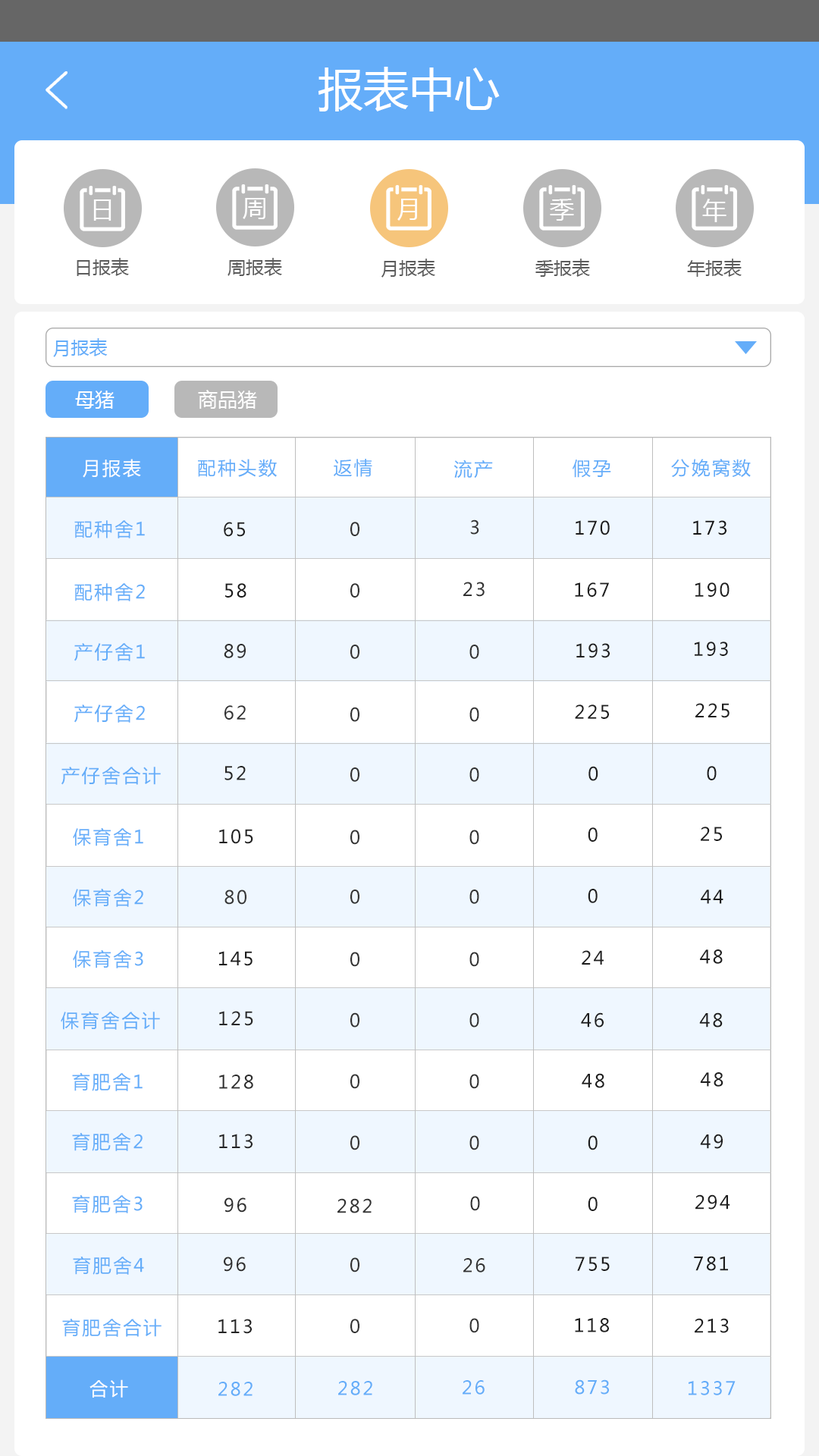
<style>
.page{position:relative;width:819px;height:1456px;background:#ffffff}
.page>*{position:absolute;margin:0}
.t1{font:45.5px "MicrosoftYaHei";color:#ffffff}
.t2{font:24.3px "MicrosoftYaHei";color:#ffffff}
.t3{font:18.2px "MicrosoftYaHei";color:#5c5c5c}
.t4{font:18.2px "MicrosoftYaHei";color:#64adf9}
.t5{font:19.7px "MicrosoftYaHei";color:#ffffff}
.t6{font:18.5px "MicrosoftYaHei";letter-spacing:0.1em;color:#ffffff}
.t7{font:18.5px "MicrosoftYaHei";letter-spacing:0.1em;color:#64adf9}
.t8{font:18.5px "MicrosoftYaHei";letter-spacing:0.1em;color:#1f1f1f}
.t9{font:18.5px "MicrosoftYaHei";letter-spacing:0.1em;color:#333333}
.t10{font:18.5px "MicrosoftYaHei";letter-spacing:0.1em;color:#1e1e1e}
.t11{font:18.5px "MicrosoftYaHei";letter-spacing:0.1em;color:#151515}
.t12{font:18.5px "MicrosoftYaHei";letter-spacing:0.1em;color:#1b1b1b}
.t13{font:18.5px "MicrosoftYaHei";letter-spacing:0.1em;color:#2e2e2e}
.t14{font:18.5px "MicrosoftYaHei";letter-spacing:0.1em;color:#333334}
.t15{font:18.5px "MicrosoftYaHei";letter-spacing:0.1em;color:#262626}
.t16{font:18.5px "MicrosoftYaHei";letter-spacing:0.1em;color:#212121}
.t17{font:18.5px "MicrosoftYaHei";letter-spacing:0.1em;color:#373737}
.t18{font:18.5px "MicrosoftYaHei";letter-spacing:0.1em;color:#1c1c1c}
.t19{font:18.5px "MicrosoftYaHei";letter-spacing:0.1em;color:#282828}
.t20{font:18.5px "MicrosoftYaHei";letter-spacing:0.1em;color:#242424}
.t21{font:18.5px "MicrosoftYaHei";letter-spacing:0.1em;color:#2f2f2f}
</style>
<div class="page">
<p class="t1" style="left:318px;top:67px;width:182px;height:44px">报表中心</p>
<p class="t2" style="left:243px;top:198px;width:22px;height:21px">周</p>
<p class="t2" style="left:93px;top:199px;width:18px;height:22px">日</p>
<p class="t2" style="left:397px;top:199px;width:20px;height:22px">月</p>
<p class="t2" style="left:550px;top:199px;width:24px;height:22px">季</p>
<p class="t2" style="left:702px;top:199px;width:24px;height:23px">年</p>
<p class="t3" style="left:77px;top:258px;width:52px;height:18px">日报表</p>
<p class="t3" style="left:227px;top:258px;width:55px;height:18px">周报表</p>
<p class="t3" style="left:381px;top:259px;width:54px;height:19px">月报表</p>
<p class="t3" style="left:535px;top:259px;width:55px;height:18px">季报表</p>
<p class="t3" style="left:687px;top:259px;width:55px;height:18px">年报表</p>
<p class="t4" style="left:53px;top:338px;width:55px;height:19px">月报表</p>
<p class="t5" style="left:198px;top:390px;width:59px;height:19px">商品猪</p>
<p class="t5" style="left:75px;top:391px;width:40px;height:18px">母猪</p>
<p class="t6" style="left:83px;top:459px;width:58px;height:19px">月报表</p>
<p class="t7" style="left:198px;top:459px;width:79px;height:18px">配种头数</p>
<p class="t7" style="left:334px;top:459px;width:38px;height:18px">返情</p>
<p class="t7" style="left:453px;top:460px;width:40px;height:19px">流产</p>
<p class="t7" style="left:573px;top:460px;width:38px;height:18px">假孕</p>
<p class="t7" style="left:671px;top:459px;width:80px;height:18px">分娩窝数</p>
<p class="t7" style="left:74px;top:520px;width:71px;height:18px">配种舍1</p>
<p class="t8" style="left:224px;top:522px;width:21px;height:15px">65</p>
<p class="t9" style="left:350px;top:522px;width:9px;height:14px">0</p>
<p class="t9" style="left:470px;top:519px;width:9px;height:16px">3</p>
<p class="t10" style="left:576px;top:520px;width:34px;height:15px">170</p>
<p class="t11" style="left:693px;top:520px;width:33px;height:15px">173</p>
<p class="t9" style="left:463px;top:582px;width:22px;height:15px">23</p>
<p class="t7" style="left:74px;top:583px;width:71px;height:18px">配种舍2</p>
<p class="t12" style="left:225px;top:583px;width:21px;height:15px">58</p>
<p class="t9" style="left:350px;top:583px;width:9px;height:15px">0</p>
<p class="t10" style="left:575px;top:582px;width:34px;height:15px">167</p>
<p class="t10" style="left:695px;top:582px;width:35px;height:15px">190</p>
<p class="t10" style="left:695px;top:642px;width:33px;height:14px">193</p>
<p class="t7" style="left:74px;top:643px;width:71px;height:18px">产仔舍1</p>
<p class="t13" style="left:224px;top:644px;width:22px;height:14px">89</p>
<p class="t9" style="left:350px;top:645px;width:9px;height:14px">0</p>
<p class="t9" style="left:469px;top:645px;width:10px;height:14px">0</p>
<p class="t10" style="left:576px;top:643px;width:34px;height:15px">193</p>
<p class="t7" style="left:74px;top:704px;width:71px;height:19px">产仔舍2</p>
<p class="t14" style="left:224px;top:705px;width:22px;height:15px">62</p>
<p class="t9" style="left:350px;top:707px;width:9px;height:15px">0</p>
<p class="t9" style="left:469px;top:707px;width:10px;height:15px">0</p>
<p class="t10" style="left:575px;top:704px;width:34px;height:15px">225</p>
<p class="t10" style="left:695px;top:703px;width:35px;height:15px">225</p>
<p class="t7" style="left:61px;top:767px;width:100px;height:18px">产仔舍合计</p>
<p class="t15" style="left:224px;top:766px;width:22px;height:14px">52</p>
<p class="t9" style="left:350px;top:767px;width:9px;height:15px">0</p>
<p class="t9" style="left:469px;top:767px;width:10px;height:15px">0</p>
<p class="t10" style="left:588px;top:766px;width:10px;height:15px">0</p>
<p class="t10" style="left:707px;top:766px;width:10px;height:14px">0</p>
<p class="t7" style="left:73px;top:827px;width:70px;height:19px">保育舍1</p>
<p class="t16" style="left:219px;top:829px;width:34px;height:15px">105</p>
<p class="t9" style="left:350px;top:830px;width:9px;height:15px">0</p>
<p class="t9" style="left:469px;top:830px;width:10px;height:15px">0</p>
<p class="t10" style="left:588px;top:827px;width:10px;height:15px">0</p>
<p class="t10" style="left:701px;top:827px;width:21px;height:14px">25</p>
<p class="t7" style="left:73px;top:888px;width:70px;height:19px">保育舍2</p>
<p class="t17" style="left:224px;top:890px;width:22px;height:15px">80</p>
<p class="t9" style="left:350px;top:890px;width:9px;height:14px">0</p>
<p class="t9" style="left:469px;top:890px;width:10px;height:14px">0</p>
<p class="t10" style="left:588px;top:889px;width:10px;height:14px">0</p>
<p class="t10" style="left:701px;top:890px;width:22px;height:14px">44</p>
<p class="t7" style="left:73px;top:949px;width:70px;height:19px">保育舍3</p>
<p class="t18" style="left:219px;top:951px;width:34px;height:15px">145</p>
<p class="t9" style="left:350px;top:952px;width:9px;height:15px">0</p>
<p class="t9" style="left:469px;top:952px;width:10px;height:15px">0</p>
<p class="t10" style="left:582px;top:950px;width:22px;height:15px">24</p>
<p class="t10" style="left:700px;top:949px;width:23px;height:15px">48</p>
<p class="t7" style="left:61px;top:1011px;width:99px;height:19px">保育舍合计</p>
<p class="t19" style="left:219px;top:1011px;width:34px;height:15px">125</p>
<p class="t9" style="left:350px;top:1012px;width:9px;height:16px">0</p>
<p class="t9" style="left:469px;top:1012px;width:10px;height:16px">0</p>
<p class="t10" style="left:581px;top:1012px;width:23px;height:16px">46</p>
<p class="t10" style="left:699px;top:1012px;width:24px;height:16px">48</p>
<p class="t7" style="left:72px;top:1072px;width:71px;height:19px">育肥舍1</p>
<p class="t9" style="left:350px;top:1074px;width:9px;height:15px">0</p>
<p class="t9" style="left:469px;top:1074px;width:10px;height:15px">0</p>
<p class="t10" style="left:582px;top:1073px;width:22px;height:15px">48</p>
<p class="t10" style="left:700px;top:1072px;width:23px;height:15px">48</p>
<p class="t13" style="left:219px;top:1075px;width:34px;height:14px">128</p>
<p class="t7" style="left:72px;top:1132px;width:71px;height:19px">育肥舍2</p>
<p class="t20" style="left:219px;top:1134px;width:34px;height:15px">113</p>
<p class="t10" style="left:700px;top:1134px;width:23px;height:15px">49</p>
<p class="t9" style="left:350px;top:1135px;width:9px;height:15px">0</p>
<p class="t9" style="left:469px;top:1135px;width:10px;height:15px">0</p>
<p class="t10" style="left:588px;top:1135px;width:10px;height:15px">0</p>
<p class="t7" style="left:72px;top:1194px;width:71px;height:19px">育肥舍3</p>
<p class="t21" style="left:224px;top:1197px;width:22px;height:16px">96</p>
<p class="t9" style="left:337px;top:1198px;width:35px;height:15px">282</p>
<p class="t9" style="left:470px;top:1196px;width:10px;height:15px">0</p>
<p class="t10" style="left:588px;top:1197px;width:10px;height:14px">0</p>
<p class="t10" style="left:695px;top:1194px;width:35px;height:16px">294</p>
<p class="t7" style="left:73px;top:1256px;width:71px;height:19px">育肥舍4</p>
<p class="t21" style="left:224px;top:1257px;width:22px;height:15px">96</p>
<p class="t9" style="left:350px;top:1257px;width:9px;height:15px">0</p>
<p class="t9" style="left:463px;top:1258px;width:22px;height:14px">26</p>
<p class="t10" style="left:576px;top:1257px;width:34px;height:14px">755</p>
<p class="t10" style="left:694px;top:1256px;width:34px;height:15px">781</p>
<p class="t7" style="left:62px;top:1318px;width:100px;height:19px">育肥舍合计</p>
<p class="t20" style="left:218px;top:1319px;width:34px;height:15px">113</p>
<p class="t9" style="left:350px;top:1319px;width:9px;height:14px">0</p>
<p class="t9" style="left:469px;top:1318px;width:10px;height:15px">0</p>
<p class="t10" style="left:575px;top:1318px;width:34px;height:14px">118</p>
<p class="t10" style="left:695px;top:1318px;width:34px;height:15px">213</p>
<p class="t6" style="left:89px;top:1379px;width:39px;height:19px">合计</p>
<p class="t7" style="left:218px;top:1382px;width:35px;height:14px">282</p>
<p class="t7" style="left:338px;top:1381px;width:34px;height:14px">282</p>
<p class="t7" style="left:463px;top:1380px;width:22px;height:15px">26</p>
<p class="t7" style="left:575px;top:1379px;width:34px;height:16px">873</p>
<p class="t7" style="left:689px;top:1381px;width:47px;height:14px">1337</p>
</div>
